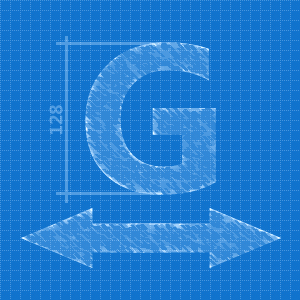
<style>
.page{position:relative;width:300px;height:300px}
.page>*{position:absolute;margin:0}
.t1{font:18px "LaoUI-Bold";color:#529de2}
</style>
<div class="page">
<p class="t1" style="left:49px;top:105px;width:14px;height:29px;rotate:-90deg">128</p>
</div>
